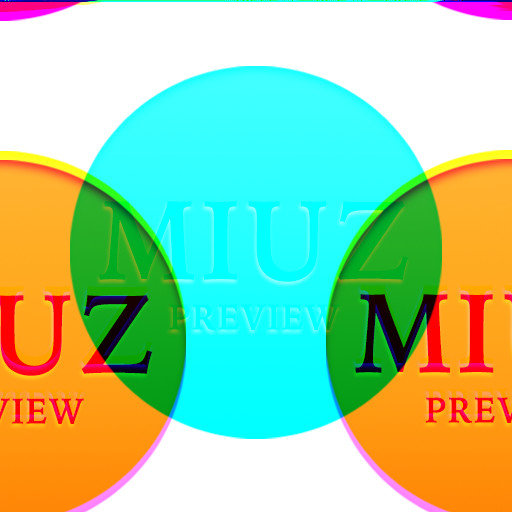
<style>
.page{position:relative;width:512px;height:512px;background:#ffffff}
.page>*{position:absolute;margin:0}
.t1{font:112.2px "IowanOldStyle-Bold";letter-spacing:0.025em;text-transform:uppercase;font-weight:bold;scale:0.91 1}
.t2{font:35.5px "IowanOldStyle-Bold";letter-spacing:0.025em;text-transform:uppercase;font-weight:bold;scale:0.91 1}
</style>
<div class="page">
<p class="t1" style="left:99px;top:199px;width:309px;height:81px">MIUZ</p>
<p class="t2" style="left:169px;top:302px;width:171px;height:26px">preview</p>
</div>
